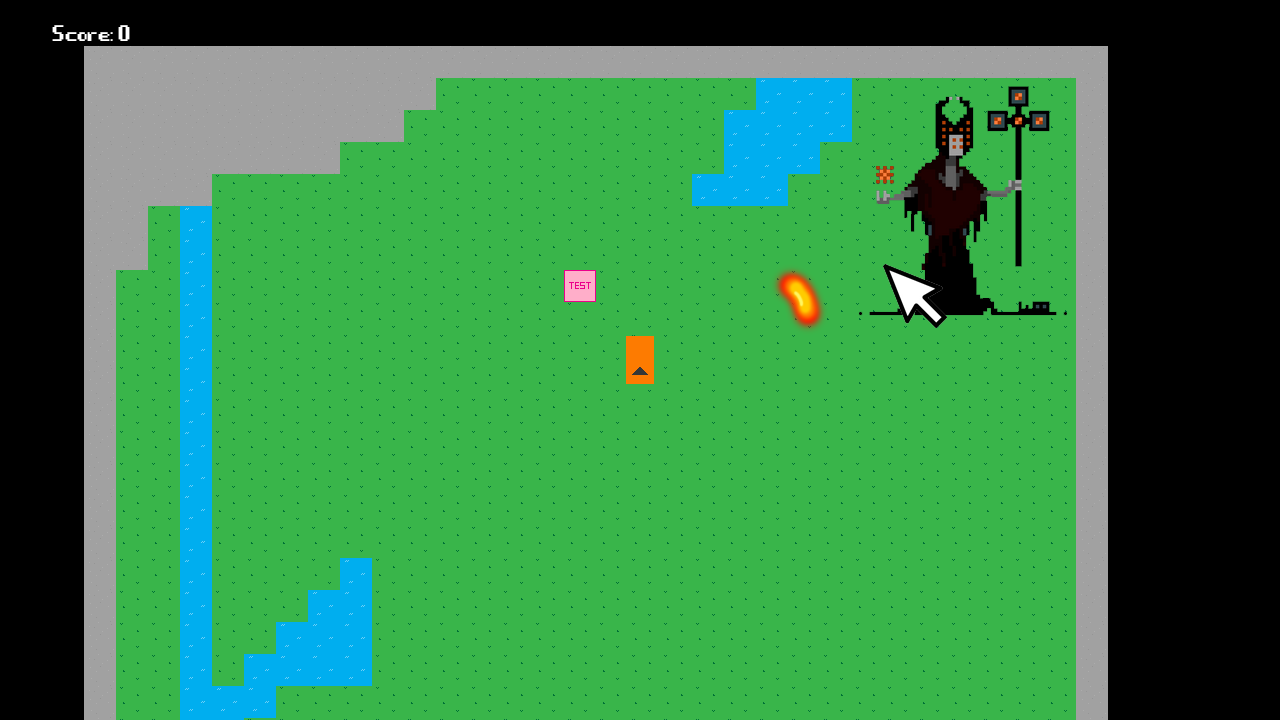
<style>
.page{position:relative;width:1280px;height:720px;background:#39b54a}
.page>*{position:absolute;margin:0}
.t1{font:55.6px "Game-Over";color:#ffffff}
</style>
<div class="page">
<p class="t1" style="left:52px;top:25px;width:78px;height:16px">Score: 0</p>
</div>
